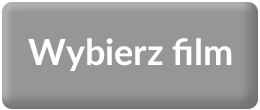
<style>
.page{position:relative;width:260px;height:110px;background:#969696}
.page>*{position:absolute;margin:0}
.t1{font:36px "Lato-Bold";color:#ffffff}
</style>
<div class="page">
<p class="t1" style="left:28px;top:38px;width:204px;height:33px">Wybierz film</p>
</div>
